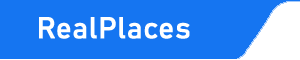
<style>
.page{position:relative;width:300px;height:60px;background:#1575f1}
.page>*{position:absolute;margin:0}
.t1{font:29.4px "Bahnschrift";color:#ffffff;font-weight:bold}
</style>
<div class="page">
<p class="t1" style="left:39px;top:17px;width:151px;height:22px">RealPlaces</p>
</div>
